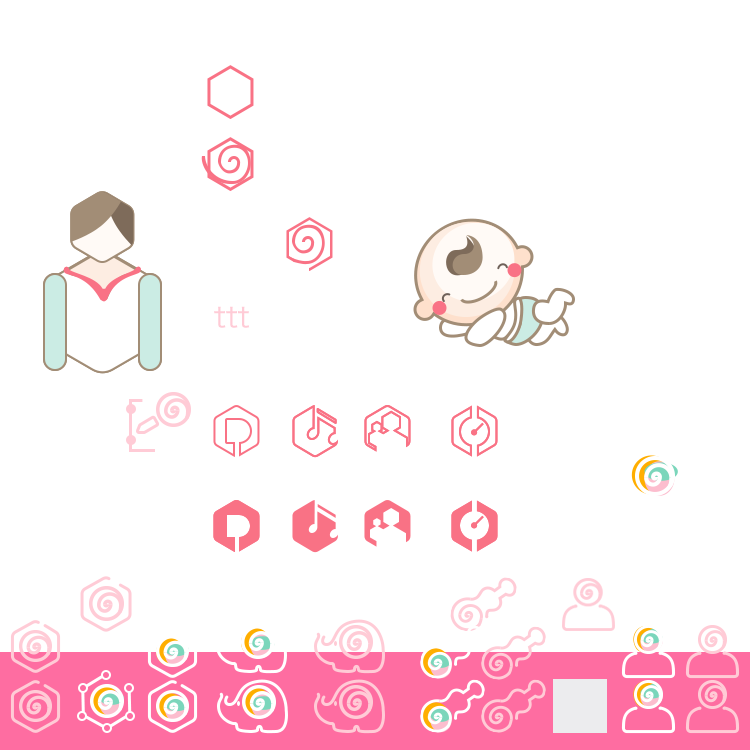
<style>
.page{position:relative;width:750px;height:750px;background:#ffffff}
.page>*{position:absolute;margin:0}
.t1{font:30.2px "HiraginoSansGB-W3";color:#ffcbd6}
</style>
<div class="page">
<p class="t1" style="left:214px;top:306px;width:36px;height:22px">ttt</p>
</div>
